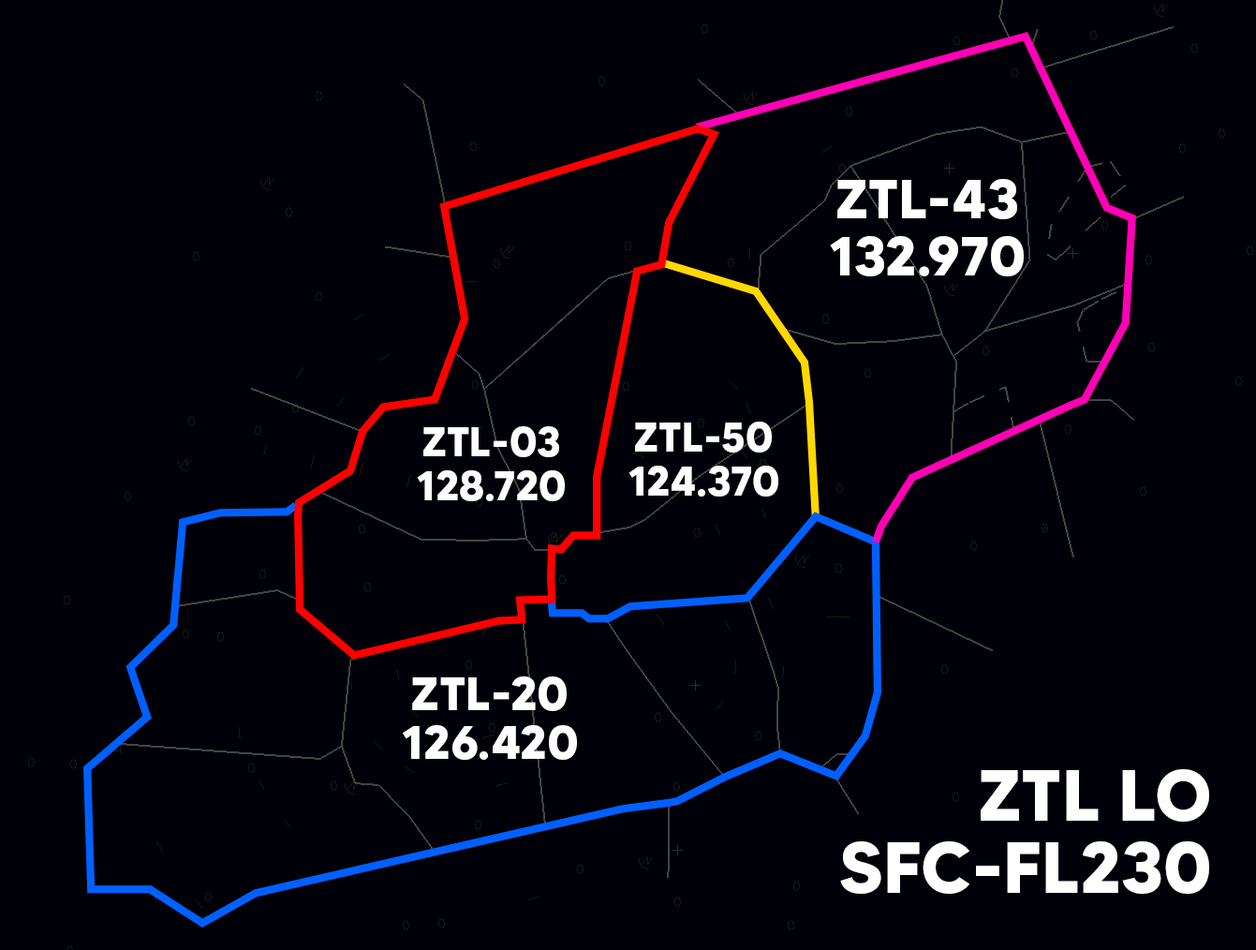
<style>
.page{position:relative;width:1256px;height:950px;background:#000008}
.page>*{position:absolute;margin:0}
.t1{font:54.9px/57.4px "MADETOMMY-Bold";color:#ffffff}
.t2{font:41.2px/43.7px "MADETOMMY-Bold";color:#ffffff}
.t3{font:47.4px/48.7px "MADETOMMY-Bold";color:#ffffff}
.t4{font:72.4px/72.4px "MADETOMMY-Bold";color:#ffffff}
</style>
<div class="page">
<p class="t1" style="left:830px;top:179px;width:194px;height:97px;text-align:center">ZTL-43<br>132.970</p>
<p class="t2" style="left:628px;top:421px;width:150px;height:75px;text-align:center">ZTL-50<br>124.370</p>
<p class="t2" style="left:417px;top:426px;width:148px;height:75px;text-align:center">ZTL-03<br>128.720</p>
<p class="t3" style="left:403px;top:676px;width:174px;height:83px;text-align:center">ZTL-20<br>126.420</p>
<p class="t4" style="left:840px;top:769px;width:369px;height:124px;text-align:right">ZTL LO<br>SFC-FL230</p>
</div>
